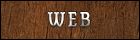
<style>
.page{position:relative;width:140px;height:40px}
.page>*{position:absolute;margin:0}
.t1{font:21.1px "Mason-Regular";letter-spacing:0.1em;font-weight:bold;scale:0.79 1}
</style>
<div class="page">
<p class="t1" style="left:47px;top:12px;width:43px;height:15px">WEB</p>
</div>
